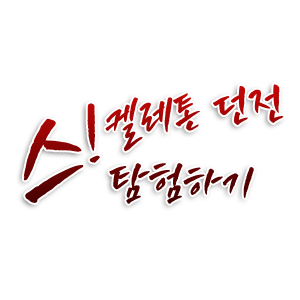
<style>
.page{position:relative;width:300px;height:300px;background:#ffffff}
.page>*{position:absolute;margin:0}
.t1{font:49.7px "TTOhneuleunB";color:#ae0606}
.t2{font:73.2px "TTOhneuleunB";color:#a10505}
.t3{font:124.3px "TTOhneuleunB"}
.t4{font:49.7px "TTOhneuleunB";color:#580202}
</style>
<div class="page">
<p class="t1" style="left:105px;top:84px;width:179px;height:68px;rotate:-9deg">켈레톤 던전</p>
<p class="t2" style="left:87px;top:103px;width:13px;height:60px;rotate:-16deg">!</p>
<p class="t3" style="left:23px;top:118px;width:61px;height:85px;rotate:-8deg">스</p>
<p class="t4" style="left:109px;top:163px;width:145px;height:41px">탐험하기</p>
</div>
